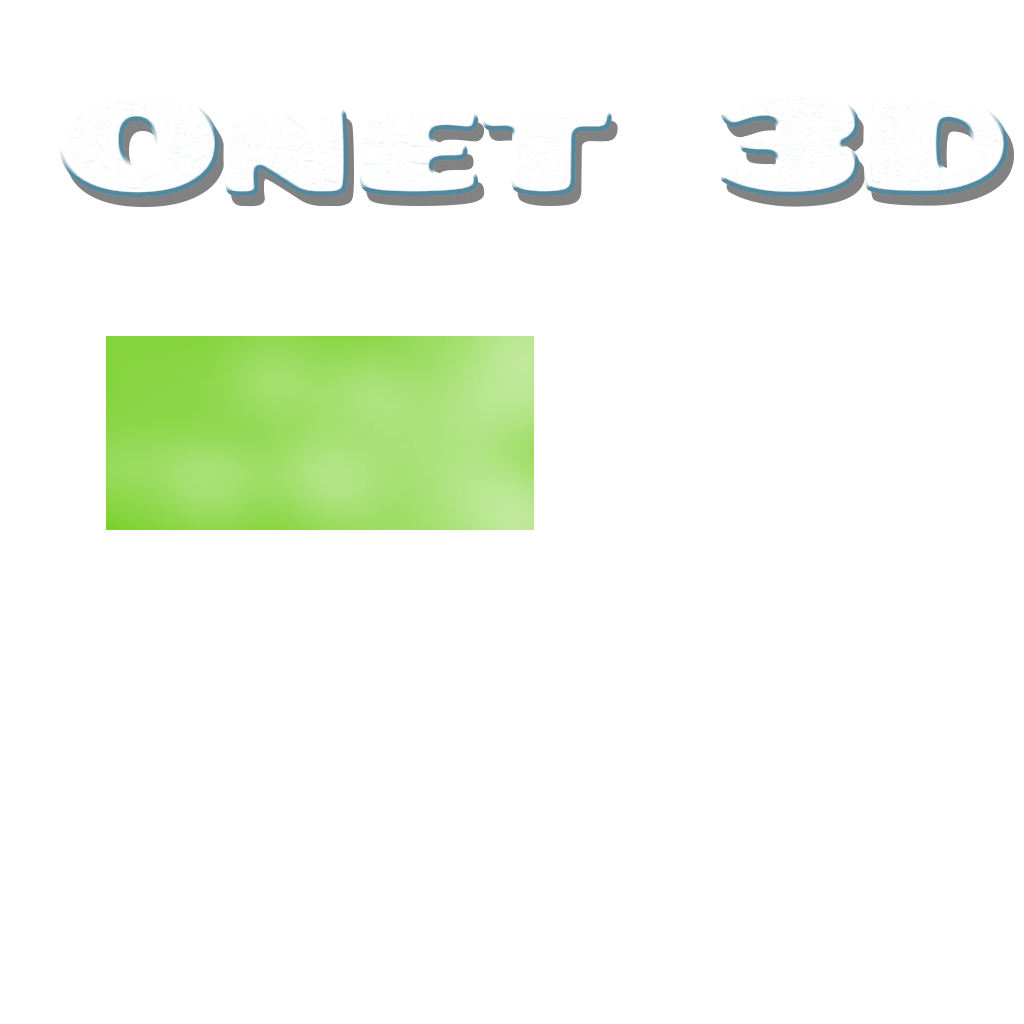
<style>
.page{position:relative;width:1024px;height:1024px;background:#ffffff}
.page>*{position:absolute;margin:0}
.t1{font:156.3px "Pusab";letter-spacing:-0.02em;scale:1.48 1}
</style>
<div class="page">
<p class="t1" style="left:65px;top:101px;width:949px;height:106px">Onet 3D</p>
</div>
